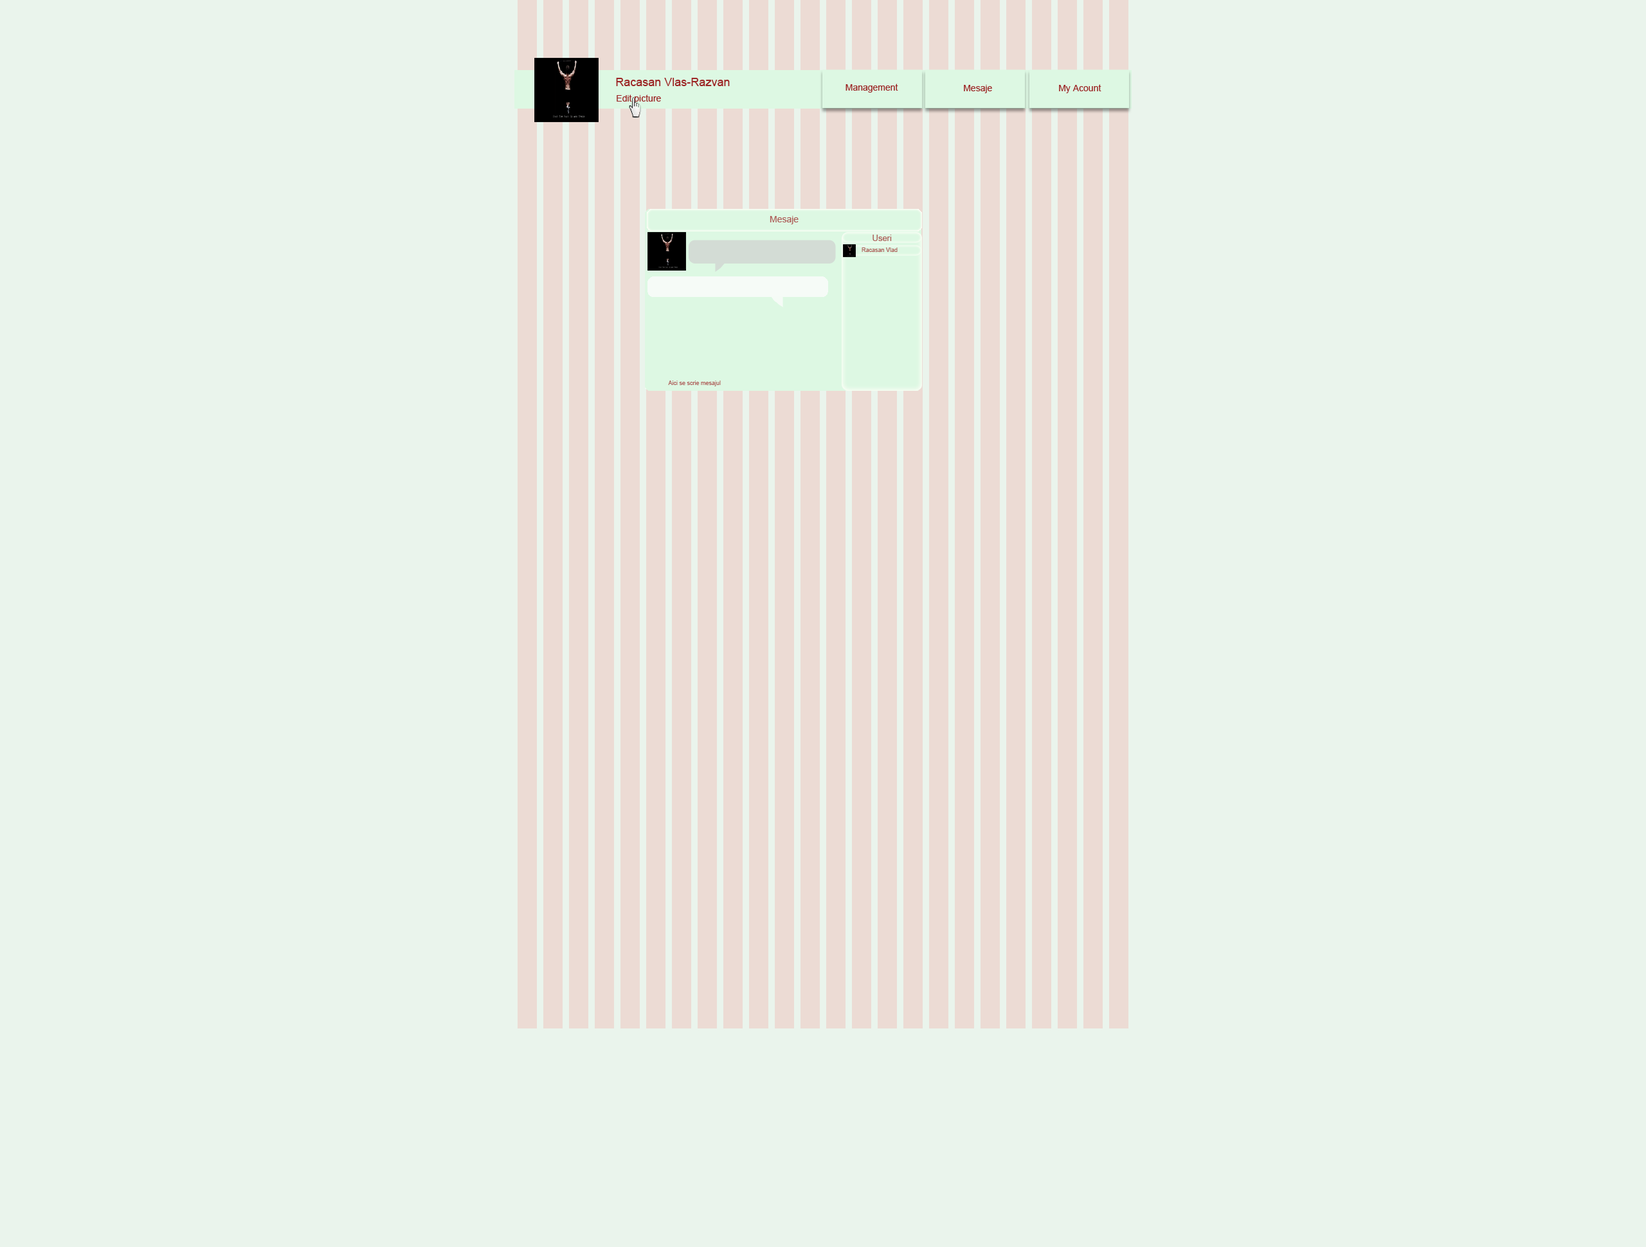
<style>
.page{position:relative;width:1646px;height:1247px;background:#eaf4ec}
.page>*{position:absolute;margin:0}
.t1{font:11.6px "ArialMT";color:#9c2525}
.t2{font:9px "ArialMT";color:#9c2525}
.t3{font:9px "ArialMT";color:#ad5d58}
.t4{font:8.4px "ArialMT";color:#ad5d58}
.t5{font:5.8px "ArialMT";color:#ad5d58}
</style>
<div class="page">
<p class="t1" style="left:616px;top:78px;width:114px;height:8px">Racasan Vlas-Razvan</p>
<p class="t2" style="left:845px;top:84px;width:53px;height:9px">Management</p>
<p class="t2" style="left:964px;top:85px;width:28px;height:8px">Mesaje</p>
<p class="t2" style="left:1059px;top:84px;width:42px;height:9px">My Acount</p>
<p class="t2" style="left:616px;top:94px;width:45px;height:10px">Edit picture</p>
<p class="t3" style="left:770px;top:216px;width:28px;height:8px">Mesaje</p>
<p class="t4" style="left:872px;top:235px;width:20px;height:6px">Useri</p>
<p class="t5" style="left:861px;top:248px;width:36px;height:4px">Racasan Vlad</p>
<p class="t5" style="left:668px;top:381px;width:53px;height:5px">Aici se scrie mesajul</p>
</div>
